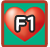
<style>
.page{position:relative;width:50px;height:47px}
.page>*{position:absolute;margin:0}
.t1{font:19.3px "BMJUA";letter-spacing:0.06em;color:#ffffff}
</style>
<div class="page">
<p class="t1" style="left:16px;top:16px;width:18px;height:15px">F1</p>
</div>
